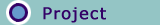
<style>
.page{position:relative;width:160px;height:25px;background:#94c5c5}
.page>*{position:absolute;margin:0}
.t1{font:16px "Verdana";letter-spacing:0.055em;color:#330066;font-weight:bold}
</style>
<div class="page">
<p class="t1" style="left:43px;top:7px;width:63px;height:16px">Project</p>
</div>
